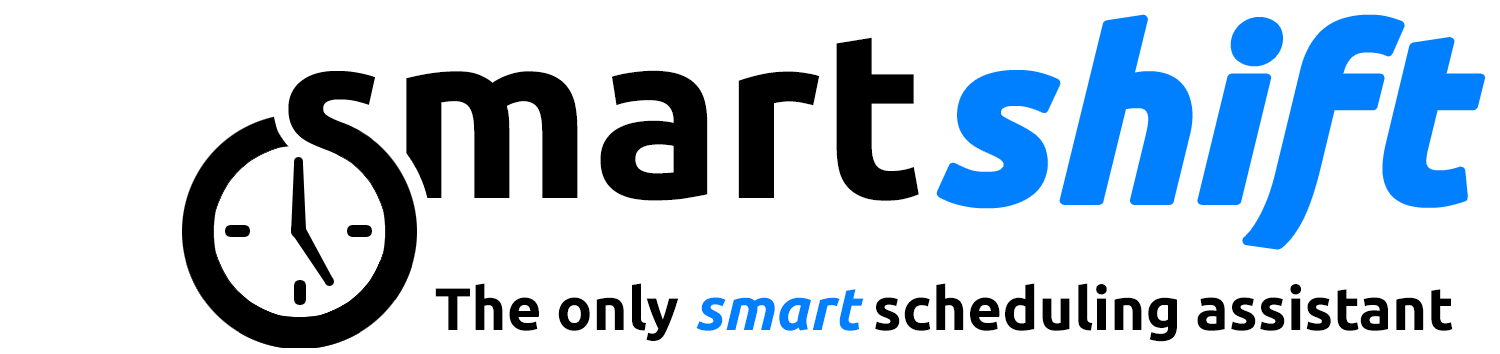
<style>
.page{position:relative;width:1500px;height:354px;background:#ffffff}
.page>*{position:absolute;margin:0}
.t1{font:235px "Ubuntu-BoldItalic";letter-spacing:0.01em;color:#0080ff}
.t2{font:235px "Ubuntu-Bold";color:#000000}
.t3{font:60px "Ubuntu-Bold";color:#000000}
.t4{font:60px "Ubuntu-BoldItalic";color:#0080ff}
</style>
<div class="page">
<p class="t1" style="left:940px;top:18px;width:542px;height:228px">shift</p>
<p class="t2" style="left:406px;top:37px;width:513px;height:164px">mart</p>
<p class="t3" style="left:435px;top:283px;width:1018px;height:59px">The only <span class="t4">smart</span> scheduling assistant</p>
</div>
